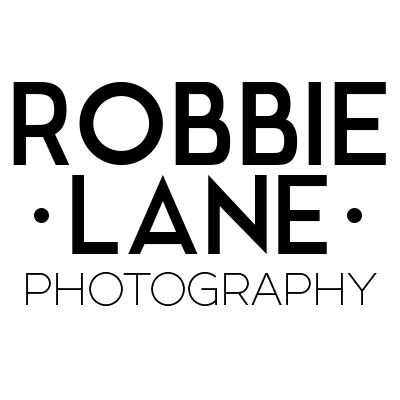
<style>
.page{position:relative;width:400px;height:400px;background:#ffffff}
.page>*{position:absolute;margin:0}
.t1{font:112px "ModernSans";color:#000000}
.t2{font:106px "ModernSans";color:#000000}
.t3{font:45px "Dual-300";color:#000000}
</style>
<div class="page">
<p class="t1" style="left:13px;top:82px;width:373px;height:83px">ROBBIE</p>
<p class="t2" style="left:72px;top:175px;width:255px;height:79px">LANE</p>
<p class="t3" style="left:26px;top:272px;width:351px;height:34px">PHOTOGRAPHY</p>
</div>
